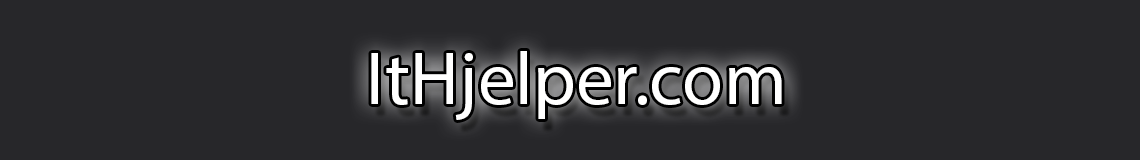
<style>
.page{position:relative;width:1140px;height:160px;background:#27272a}
.page>*{position:absolute;margin:0}
.t1{font:75px "MyriadPro-Regular";color:#ffffff}
</style>
<div class="page">
<p class="t1" style="left:371px;top:51px;width:411px;height:69px">ItHjelper.com</p>
</div>
